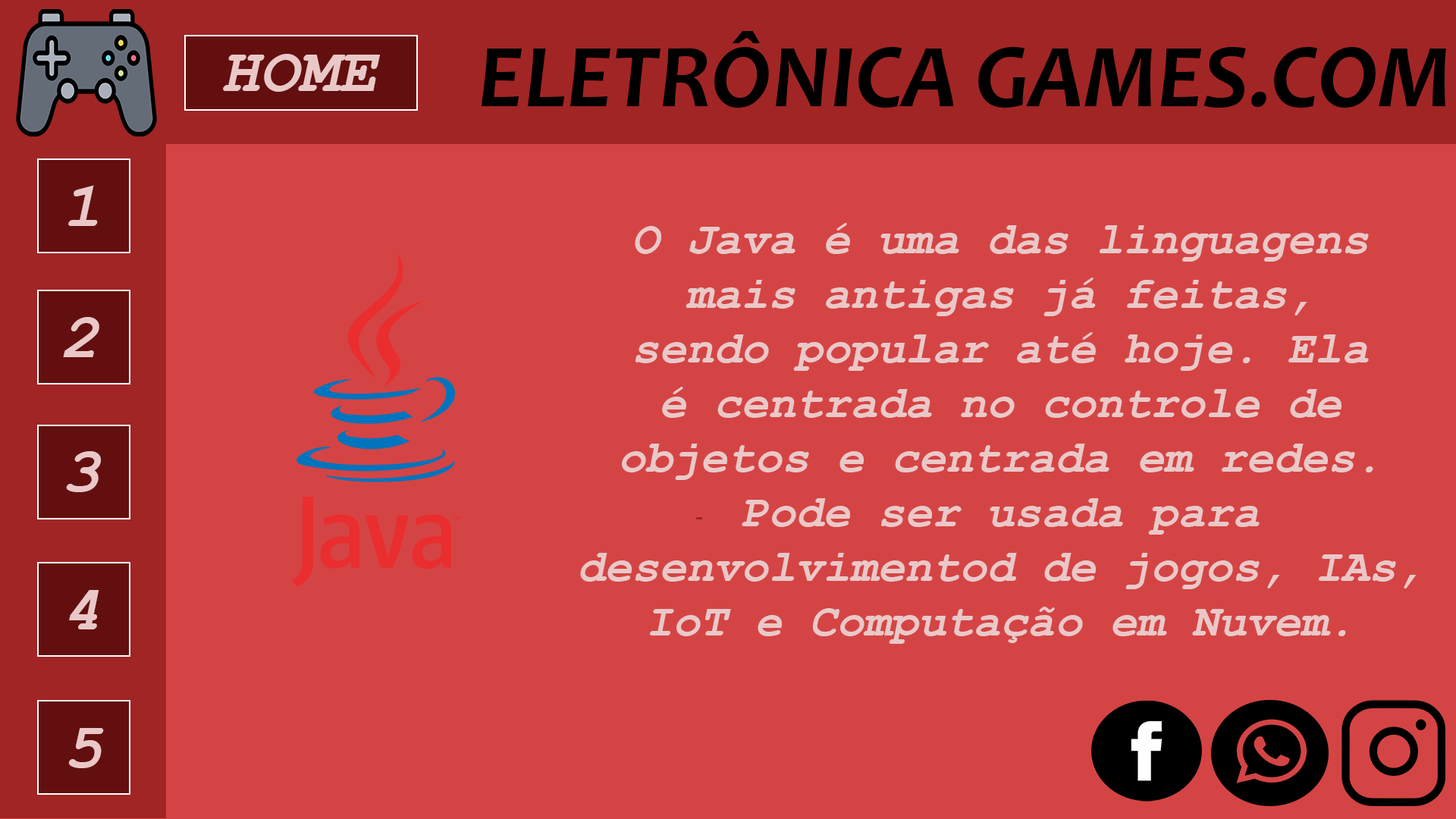
<style>
.page{position:relative;width:1456px;height:819px;background:#d54444}
.page>*{position:absolute;margin:0}
.t1{font:91px "Candara-BoldItalic";color:#000000}
.t2{font:64.5px "CourierNewPS-BoldItalicMT";color:#eac8c8}
.t3{font:45.5px "CourierNewPS-BoldItalicMT";color:#eac8c8}
</style>
<div class="page">
<p class="t1" style="left:481px;top:31px;width:965px;height:77px">ELETRÔNICA GAMES.COM</p>
<p class="t2" style="left:223px;top:54px;width:157px;height:38px">HOME</p>
<p class="t2" style="left:68px;top:185px;width:30px;height:41px">1</p>
<p class="t3" style="left:580px;top:223px;width:837px;height:421px;text-align:center">O Java é uma das linguagens<br>mais antigas já feitas,<br>sendo popular até hoje. Ela<br>é centrada no controle de<br>objetos e centrada em redes.<br>Pode ser usada para<br>desenvolvimentod de jogos, IAs,<br>IoT e Computação em Nuvem.</p>
<p class="t2" style="left:63px;top:317px;width:36px;height:40px">2</p>
<p class="t2" style="left:66px;top:451px;width:35px;height:41px">3</p>
<p class="t2" style="left:69px;top:590px;width:30px;height:39px">4</p>
<p class="t2" style="left:68px;top:728px;width:36px;height:40px">5</p>
</div>
